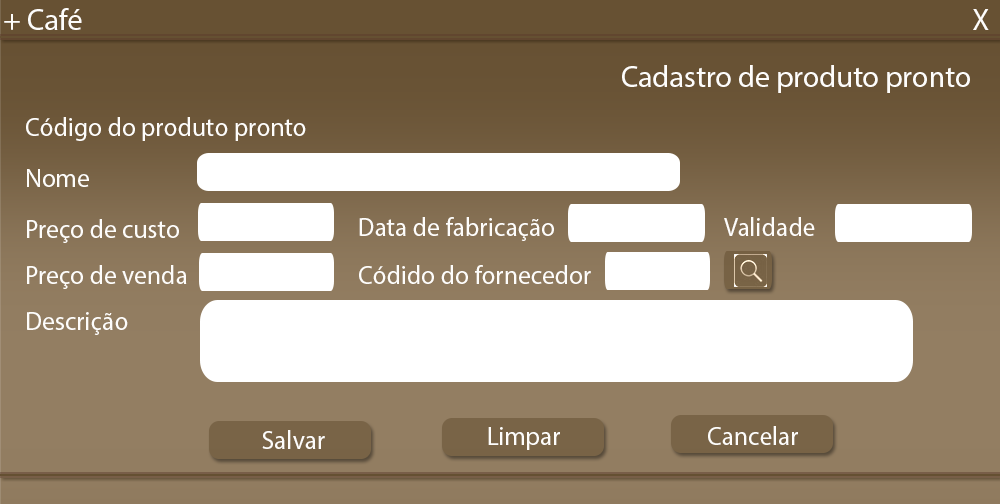
<style>
.page{position:relative;width:1000px;height:504px;background:#ffffff}
.page>*{position:absolute;margin:0}
.t1{font:30px "MyriadPro-Regular";color:#fefdfb}
.t2{font:30.1px "MyriadPro-Regular";color:#fefdfb}
.t3{font:29.9px "MyriadPro-Regular";color:#fefdfb}
.t4{font:25.7px "MyriadPro-Regular";color:#fefdfb}
.t5{font:55.1px "MyriadPro-Regular";color:#fefdfb}
</style>
<div class="page">
<p class="t1" style="left:4px;top:8px;width:78px;height:22px">+ Café</p>
<p class="t2" style="left:973px;top:9px;width:16px;height:21px">X</p>
<p class="t3" style="left:622px;top:65px;width:348px;height:28px">Cadastro de produto pronto</p>
<p class="t4" style="left:26px;top:117px;width:280px;height:24px">Código do produto pronto<br><br><span class="t5">Non</span></p>
<p class="t4" style="left:27px;top:169px;width:62px;height:18px">Nome<br><span class="t5">Non</span></p>
<p class="t4" style="left:27px;top:219px;width:152px;height:24px">Preço de custo<br><span class="t5">Non</span></p>
<p class="t4" style="left:359px;top:217px;width:195px;height:24px">Data de fabricação<br><br><br><span class="t5">Non</span></p>
<p class="t4" style="left:724px;top:217px;width:91px;height:19px">Validade<br><br><span class="t5">Non</span></p>
<p class="t4" style="left:27px;top:265px;width:160px;height:24px">Preço de venda<br><br><span class="t5">Non</span></p>
<p class="t4" style="left:359px;top:265px;width:232px;height:19px">Códido do fornecedor<br><br><br><span class="t5">Non</span></p>
<p class="t4" style="left:27px;top:312px;width:101px;height:23px">Descrição<br><span class="t5">Non</span></p>
<p class="t4" style="left:262px;top:430px;width:63px;height:19px">Salvar<br><br><br><span class="t5">Non</span></p>
<p class="t4" style="left:488px;top:427px;width:72px;height:23px">Limpar<br><br><br><span class="t5">Non</span></p>
<p class="t4" style="left:708px;top:426px;width:90px;height:19px">Cancelar<br><br><br><br><span class="t5">Non</span></p>
</div>
